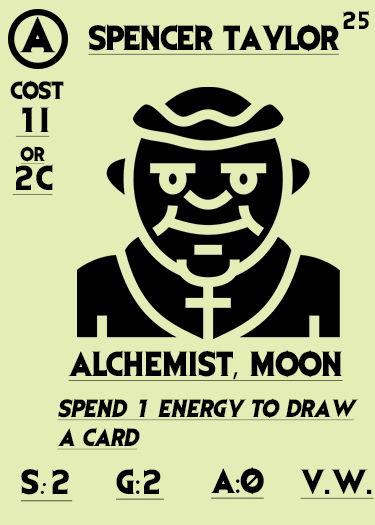
<style>
.page{position:relative;width:375px;height:525px;background:#e3edb5}
.page>*{position:absolute;margin:0}
.t1{font:41.7px "EvilDead";letter-spacing:-0.05em;color:#000000}
.t2{font:20.8px "EvilDead";letter-spacing:-0.1em;color:#000000}
.t3{font:29.2px "EvilDead";letter-spacing:-0.025em;color:#000000;text-decoration:underline}
.t4{font:20.8px "EvilDead";color:#000000}
.t5{font:29.2px/29.2px "EvilDead";color:#000000;text-decoration:underline}
.t6{font:16.7px/29.2px "EvilDead";color:#000000;text-decoration:underline}
.t7{font:29.2px "EvilDead";color:#000000;text-decoration:underline}
.t8{font:29.2px "MyriadPro-Regular";color:#000000;text-decoration:underline}
.t9{font:20.8px/29.2px "EvilDead";color:#000000;font-style:italic;text-decoration:underline}
.t10{font:29.2px "Fadli-Script";color:#000000;text-decoration:underline}
</style>
<div class="page">
<p class="t1" style="left:19px;top:16px;width:37px;height:37px">A</p>
<p class="t2" style="left:343px;top:10px;width:26px;height:19px">25</p>
<p class="t3" style="left:88px;top:24px;width:252px;height:31px">SPENCER TAYLOR</p>
<p class="t4" style="left:10px;top:80px;width:54px;height:20px">COST</p>
<p class="t5" style="left:12px;top:107px;width:41px;height:88px;text-align:center">1I<br><span class="t6">or<br></span>2C</p>
<p class="t7" style="left:68px;top:350px;width:275px;height:31px">ALCHEMIST<span class="t8">,</span> MOON</p>
<p class="t9" style="left:57px;top:398px;width:301px;height:52px">Spend 1 energy to draw<br>a card</p>
<p class="t7" style="left:21px;top:469px;width:52px;height:33px">S<span class="t10">:</span>2</p>
<p class="t7" style="left:116px;top:468px;width:49px;height:32px">G<span class="t8">:</span>2</p>
<p class="t7" style="left:210px;top:467px;width:54px;height:32px">A<span class="t8">:</span>0</p>
<p class="t7" style="left:300px;top:469px;width:74px;height:30px">V.W.</p>
</div>
